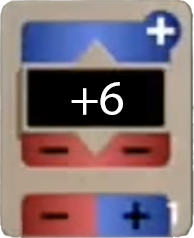
<style>
.page{position:relative;width:194px;height:238px}
.page>*{position:absolute;margin:0}
.t1{font:50px "MyriadPro-Regular";color:#ffffff}
</style>
<div class="page">
<p class="t1" style="left:71px;top:82px;width:52px;height:33px">+6</p>
</div>
